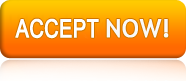
<style>
.page{position:relative;width:186px;height:81px}
.page>*{position:absolute;margin:0}
.t1{font:25.2px "ArialMT";color:#ffffff;font-weight:bold;scale:0.79 1}
</style>
<div class="page">
<p class="t1" style="left:15px;top:18px;width:84px;height:21px">ACCEPT</p>
</div>
